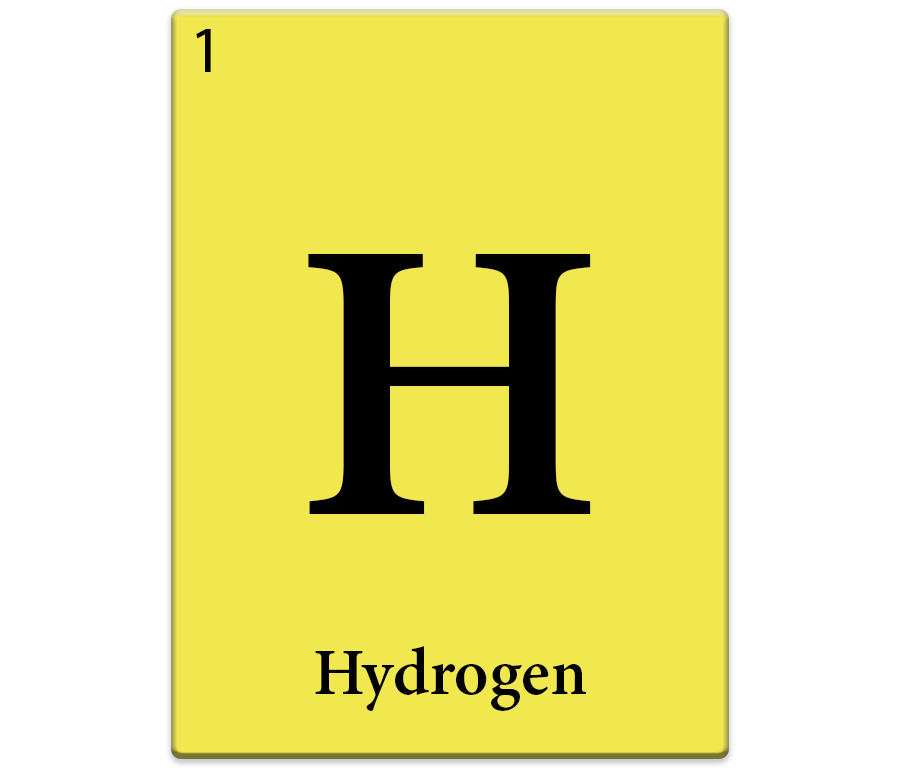
<style>
.page{position:relative;width:900px;height:768px;background:#f1e850}
.page>*{position:absolute;margin:0}
.t1{font:66.7px "MyriadPro-Regular";color:#000000}
.t2{font:400px "MinionPro-Semibold";color:#000000}
.t3{font:66.7px "MinionPro-Semibold";color:#000000}
</style>
<div class="page">
<p class="t1" style="left:196px;top:29px;width:15px;height:43px">1</p>
<p class="t2" style="left:308px;top:253px;width:283px;height:261px">H</p>
<p class="t3" style="left:315px;top:646px;width:271px;height:65px">Hydrogen</p>
</div>
